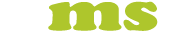
<style>
.page{position:relative;width:172px;height:35px;background:#ffffff}
.page>*{position:absolute;margin:0}
.t1{font:57.9px "CooperBlack";color:#aec62c;scale:1.33 1}
.t2{font:57.9px "CooperBlack";color:#ffffff;scale:1.33 1}
</style>
<div class="page">
<p class="t1" style="left:8px;top:1px;width:150px;height:30px"><span class="t2">c</span>ms</p>
</div>
